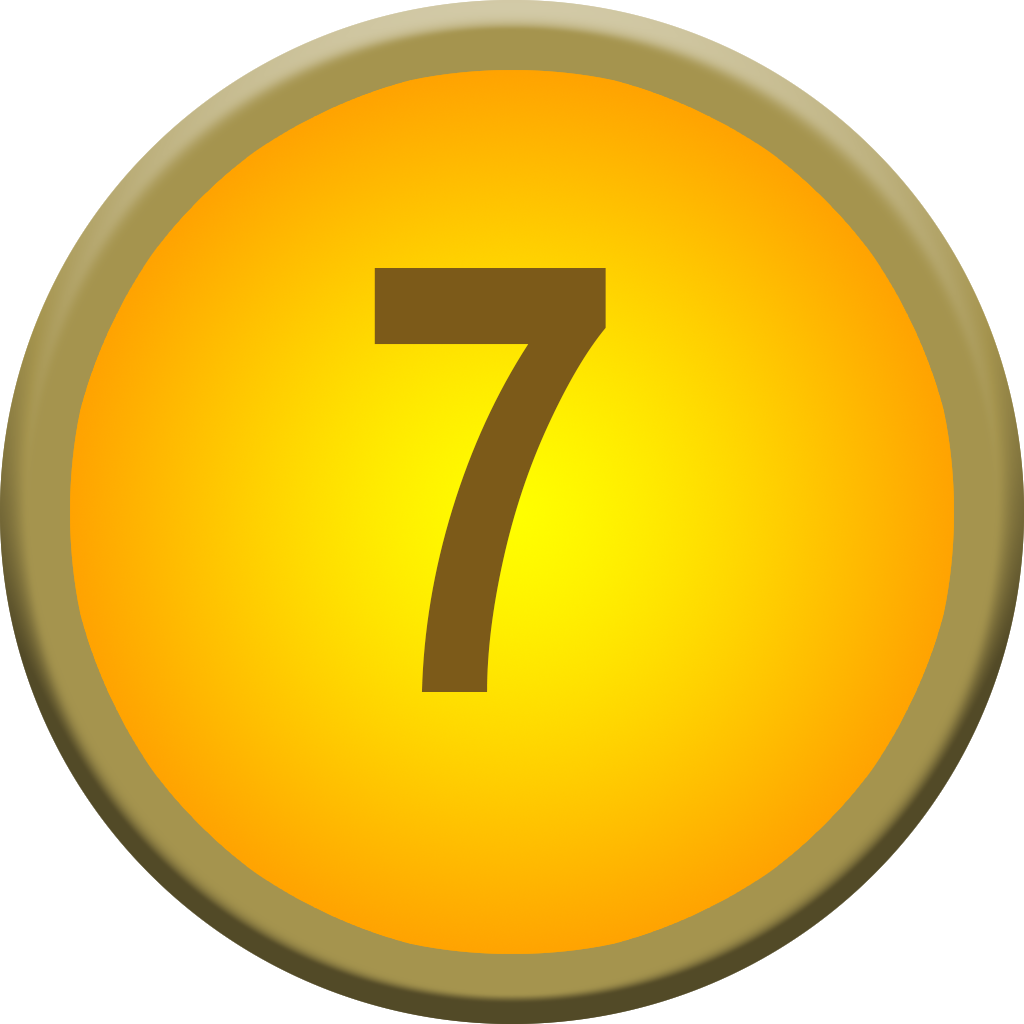
<style>
.page{position:relative;width:1024px;height:1024px;background:#ffffff}
.page>*{position:absolute;margin:0}
.t1{font:600px "ArialNarrow-Bold";color:#7c5a19}
</style>
<div class="page">
<p class="t1" style="left:374px;top:268px;width:232px;height:424px">7</p>
</div>
